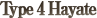
<style>
.page{position:relative;width:97px;height:18px;background:#ffffff}
.page>*{position:absolute;margin:0}
.t1{font:18px "RyuminPro-ExBold";letter-spacing:-0.1em;color:#4a3f32;font-weight:bold;scale:0.9 1}
</style>
<div class="page">
<p class="t1" style="left:0px;top:1px;width:97px;height:18px">Type 4 Hayate</p>
</div>
